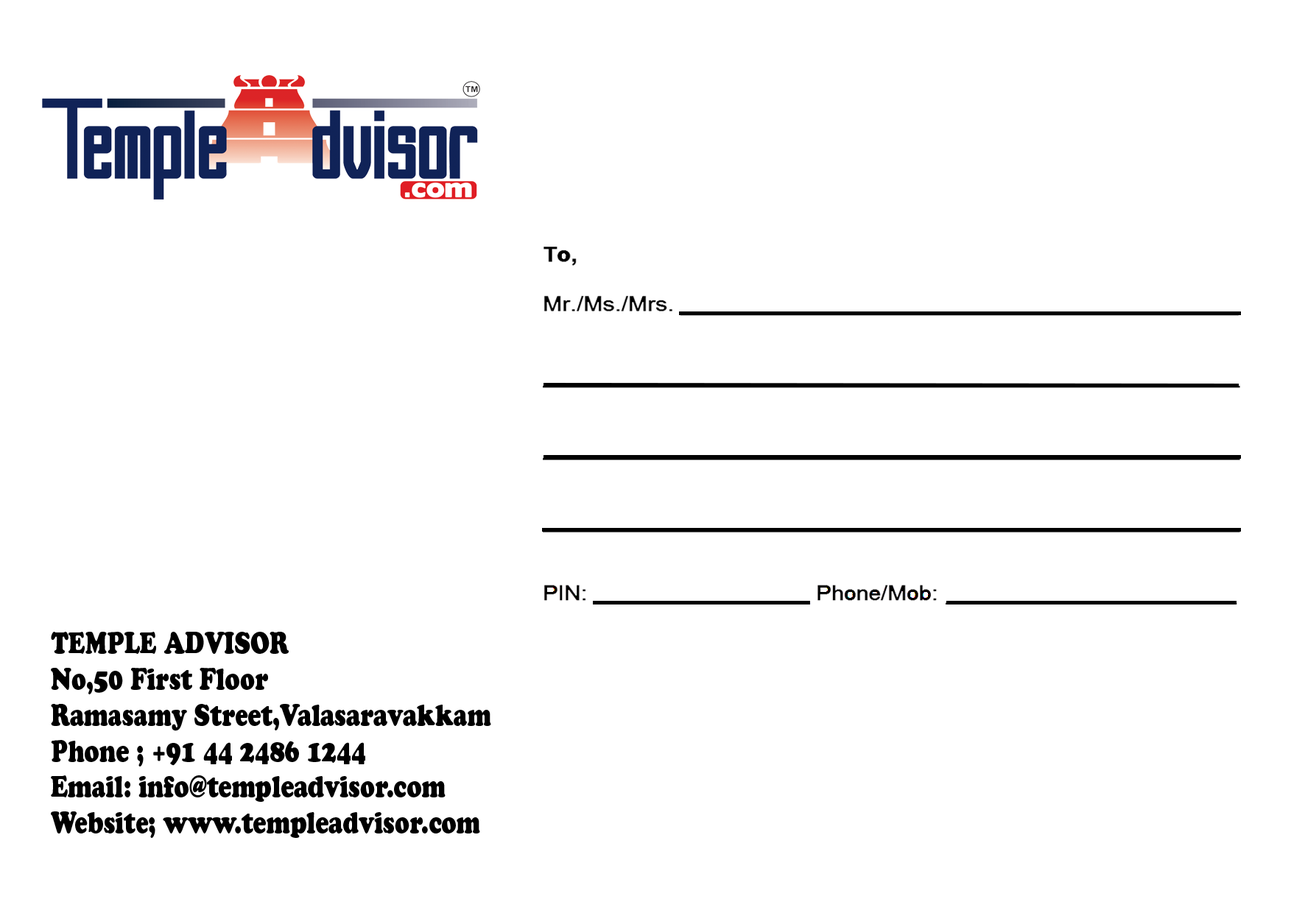
<style>
.page{position:relative;width:1305px;height:913px;background:#ffffff}
.page>*{position:absolute;margin:0}
.t1{font:29.9px "CooperBlackStd";color:#000000;scale:0.79 1}
</style>
<div class="page">
<p class="t1" style="left:51px;top:632px;width:440px;height:206px">TEMPLE ADVISOR<br>No,50 First Floor<br>Ramasamy Street,Valasaravakkam<br>Phone ; +91 44 2486 1244<br>Email: info@templeadvisor.com<br>Website; www.templeadvisor.com</p>
</div>
